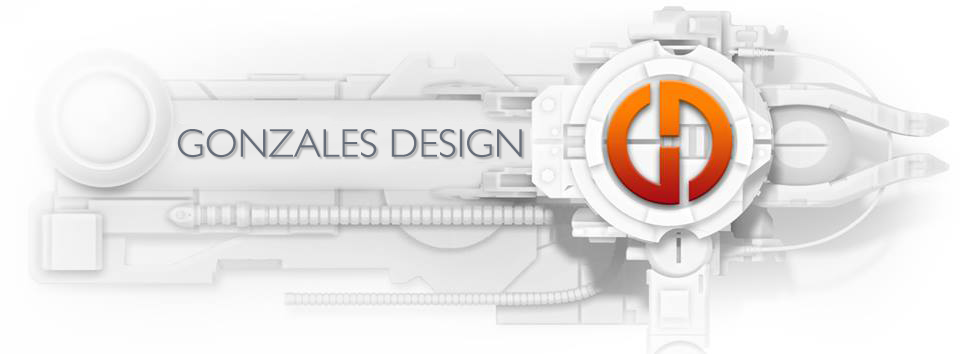
<style>
.page{position:relative;width:960px;height:354px}
.page>*{position:absolute;margin:0}
.t1{font:40px "GillSans-Light";color:#636a76}
</style>
<div class="page">
<p class="t1" style="left:177px;top:129px;width:345px;height:29px">GONZALES DESIGN</p>
</div>
